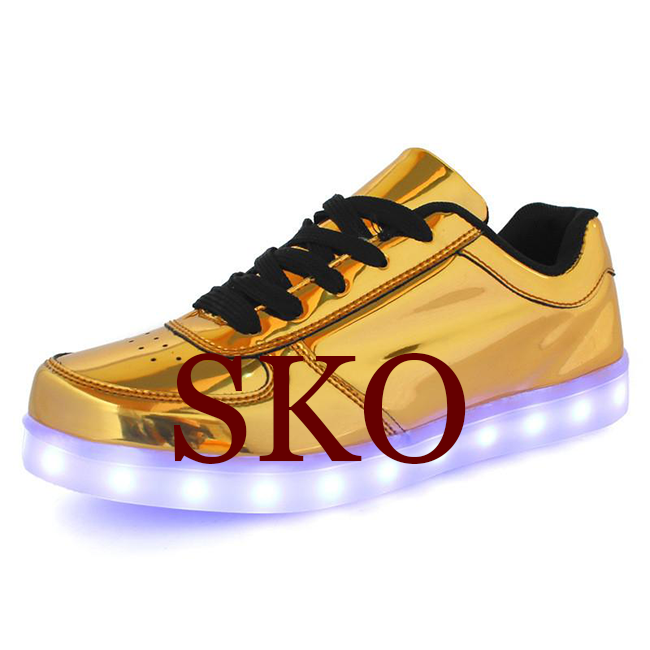
<style>
.page{position:relative;width:650px;height:650px;background:#ffffff}
.page>*{position:absolute;margin:0}
.t1{font:151.9px "Georgia";color:#650000}
</style>
<div class="page">
<p class="t1" style="left:173px;top:353px;width:293px;height:111px">SKO</p>
</div>
